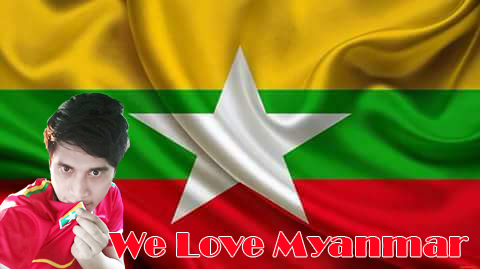
<style>
.page{position:relative;width:480px;height:269px}
.page>*{position:absolute;margin:0}
.t1{font:60px "Broadway";color:#fd051c;font-weight:bold}
</style>
<div class="page">
<p class="t1" style="left:108px;top:232px;width:360px;height:27px">We Love Myanmar</p>
</div>
